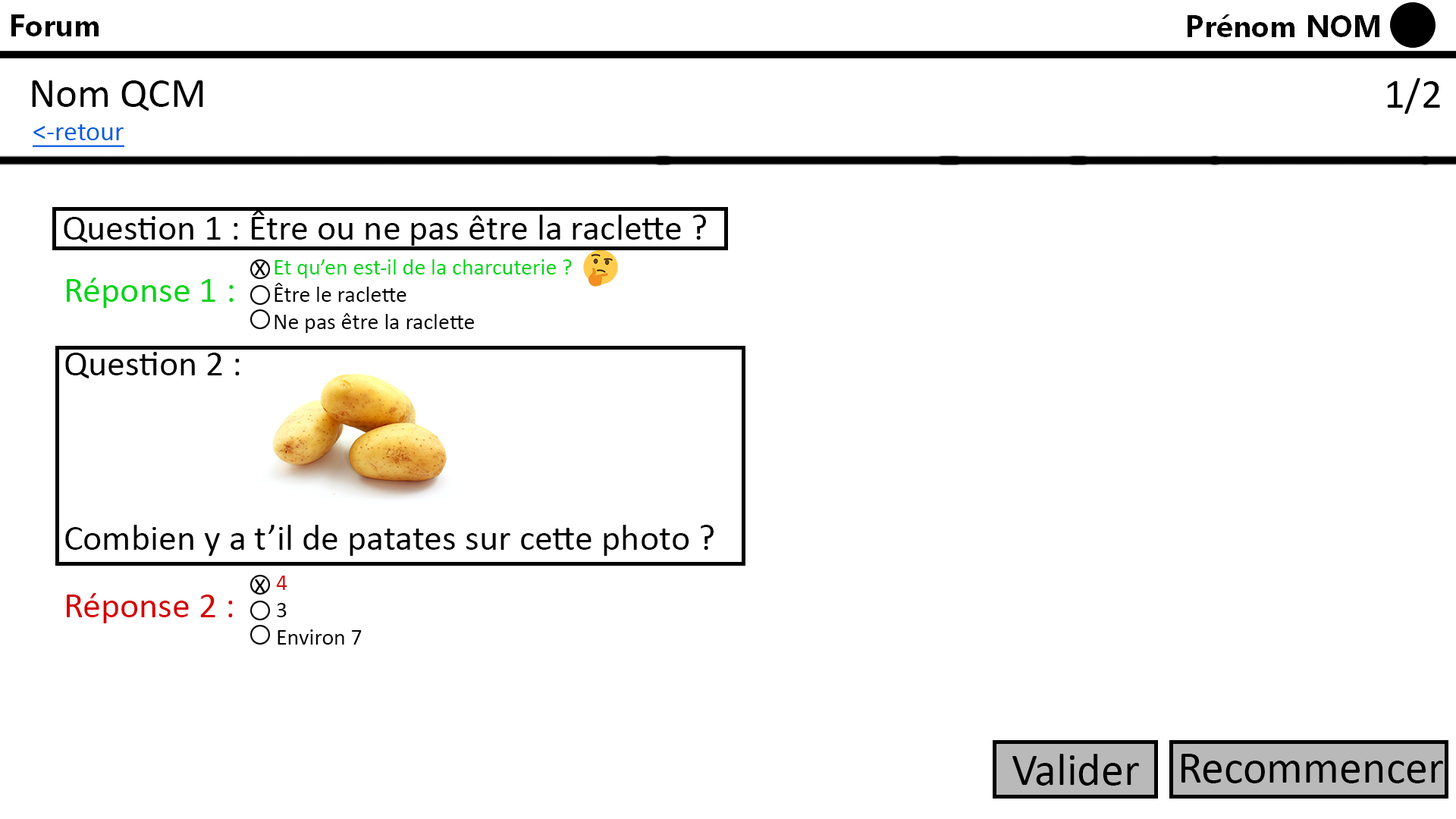
<style>
.page{position:relative;width:1456px;height:819px;background:#ffffff}
.page>*{position:absolute;margin:0}
.t1{font:41.7px "Calibri";color:#000000}
.t2{font:27.3px "Calibri";color:#005edf;text-decoration:underline}
.t3{font:36.4px "Calibri";color:#000000}
.t4{font:27.3px "Calibri";color:#000000}
.t5{font:22.7px "Calibri";color:#000000}
.t6{font:22.7px "Calibri";color:#00d419}
.t7{font:36.4px "Calibri";color:#00d419}
.t8{font:22.7px "Calibri";color:#d40000}
.t9{font:36.4px "Calibri";color:#d40000}
.t10{font:45.5px "Calibri";color:#000000}
</style>
<div class="page">
<p class="t1" style="left:32px;top:80px;width:171px;height:31px">Nom QCM</p>
<p class="t1" style="left:1387px;top:78px;width:53px;height:36px">1/2</p>
<p class="t2" style="left:33px;top:124px;width:91px;height:23px">&lt;-retour</p>
<p class="t3" style="left:64px;top:210px;width:642px;height:36px">Question 1 : Être ou ne pas être la raclette ?</p>
<p class="t4" style="left:254px;top:262px;width:11px;height:13px">x</p>
<p class="t5" style="left:275px;top:259px;width:297px;height:74px"><span class="t6">Et qu’en est-il de la charcuterie ?<br></span>Être le raclette<br>Ne pas être la raclette</p>
<p class="t7" style="left:67px;top:278px;width:167px;height:30px">Réponse 1 :</p>
<p class="t3" style="left:65px;top:352px;width:649px;height:204px">Question 2 :<br><br><br><br>Combien y a t’il de patates sur cette photo ?</p>
<p class="t4" style="left:254px;top:579px;width:11px;height:13px">x</p>
<p class="t5" style="left:276px;top:576px;width:86px;height:69px"><span class="t8">4<br></span>3<br>Environ 7</p>
<p class="t9" style="left:67px;top:593px;width:166px;height:30px">Réponse 2 :</p>
<p class="t10" style="left:1012px;top:754px;width:127px;height:32px">Valider</p>
<p class="t10" style="left:1181px;top:754px;width:262px;height:29px">Recommencer</p>
</div>
